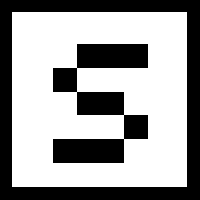
<style>
.page{position:relative;width:200px;height:200px;background:#ffffff}
.page>*{position:absolute;margin:0}
.t1{font:200px "Silkscreen";letter-spacing:-0.05em;color:#000000}
</style>
<div class="page">
<p class="t1" style="left:53px;top:44px;width:95px;height:119px">S</p>
</div>
